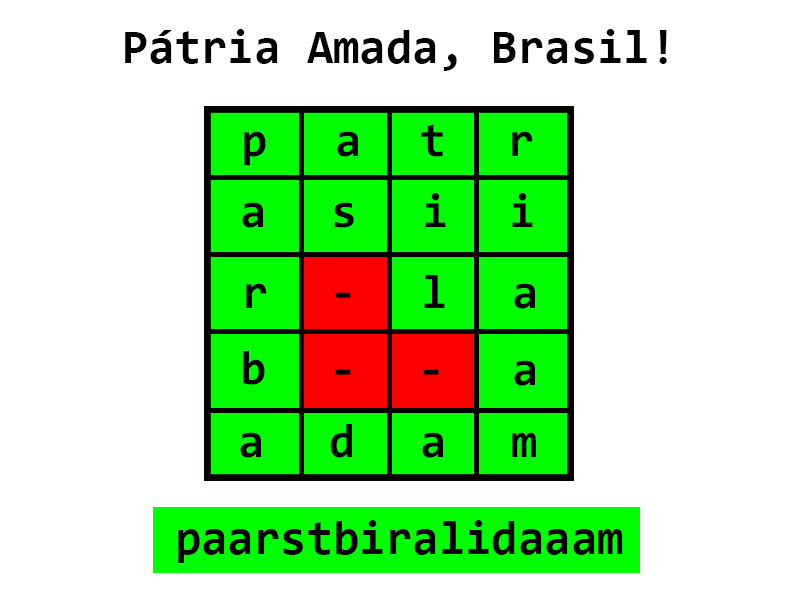
<style>
.page{position:relative;width:800px;height:600px;background:#ffffff}
.page>*{position:absolute;margin:0}
.t1{font:48px "Consolas-Bold";color:#000000}
.t2{font:48.1px "Consolas-Bold";color:#000000}
</style>
<div class="page">
<p class="t1" style="left:125px;top:29px;width:542px;height:42px">Pátria Amada, Brasil!</p>
<p class="t2" style="left:421px;top:124px;width:22px;height:33px">t</p>
<p class="t2" style="left:244px;top:131px;width:22px;height:35px">p</p>
<p class="t2" style="left:337px;top:131px;width:21px;height:26px">a</p>
<p class="t2" style="left:512px;top:131px;width:21px;height:25px">r</p>
<p class="t2" style="left:425px;top:193px;width:21px;height:34px">i</p>
<p class="t2" style="left:512px;top:193px;width:21px;height:34px">i</p>
<p class="t2" style="left:242px;top:202px;width:21px;height:26px">a</p>
<p class="t2" style="left:334px;top:202px;width:20px;height:26px">s</p>
<p class="t2" style="left:424px;top:275px;width:21px;height:33px">l</p>
<p class="t2" style="left:246px;top:283px;width:21px;height:25px">r</p>
<p class="t2" style="left:335px;top:292px;width:16px;height:6px">-</p>
<p class="t2" style="left:514px;top:283px;width:21px;height:26px">a</p>
<p class="t2" style="left:243px;top:351px;width:22px;height:34px">b</p>
<p class="t2" style="left:514px;top:360px;width:21px;height:26px">a</p>
<p class="t2" style="left:335px;top:369px;width:16px;height:6px">-</p>
<p class="t2" style="left:423px;top:369px;width:16px;height:6px">-</p>
<p class="t2" style="left:330px;top:424px;width:22px;height:34px">d</p>
<p class="t2" style="left:240px;top:432px;width:21px;height:26px">a</p>
<p class="t2" style="left:422px;top:432px;width:21px;height:26px">a</p>
<p class="t2" style="left:512px;top:432px;width:24px;height:25px">m</p>
<p class="t1" style="left:178px;top:520px;width:445px;height:43px">paarstbiralidaaam</p>
</div>
